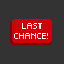
<style>
.page{position:relative;width:64px;height:64px;background:#333333}
.page>*{position:absolute;margin:0}
.t1{font:13px/10.8px "MunroSmall";color:#ffffff}
</style>
<div class="page">
<p class="t1" style="left:14px;top:23px;width:34px;height:16px;text-align:center">Last<br>Chance!</p>
</div>
